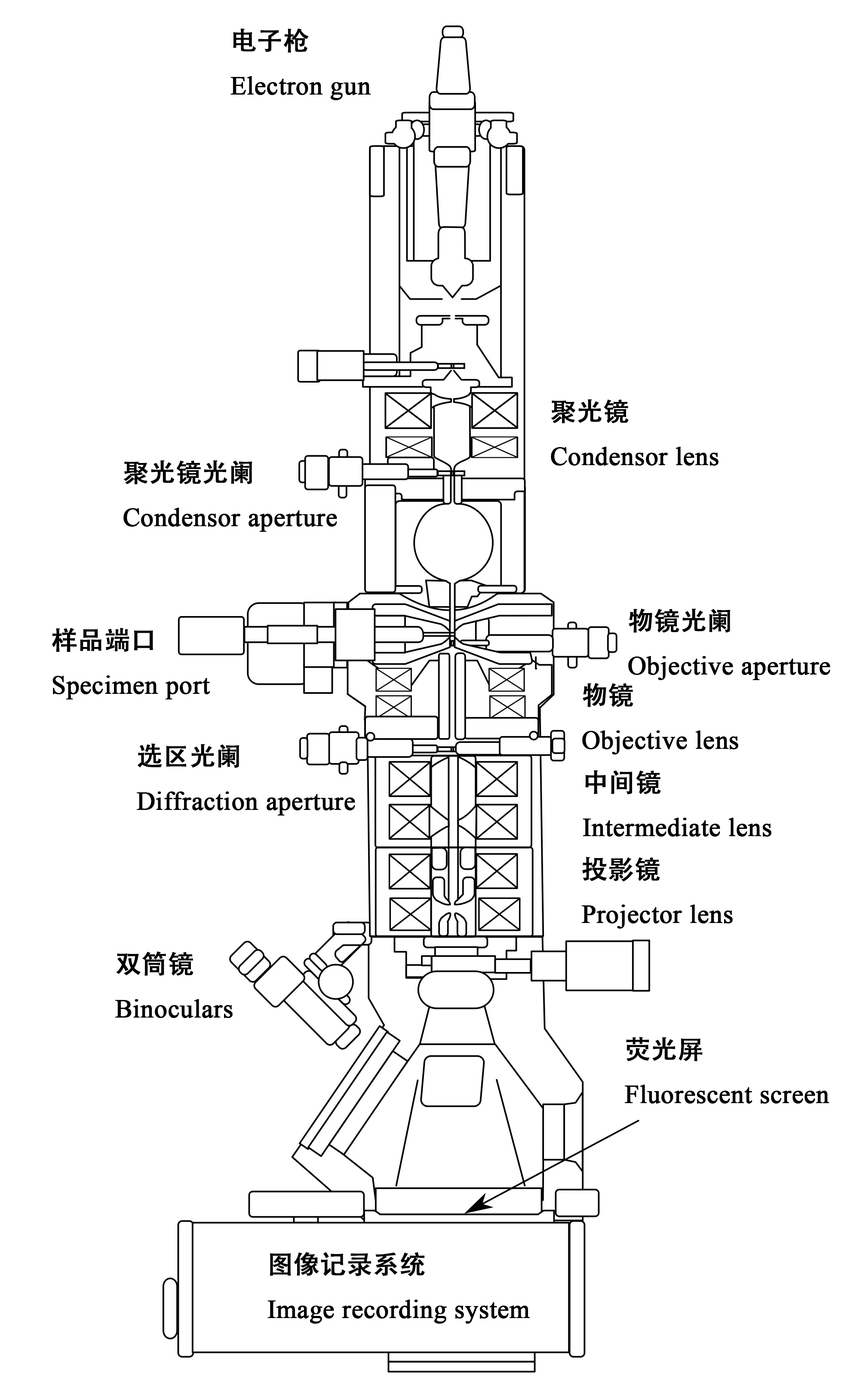
<style>
.page{position:relative;width:860px;height:1386px;background:#ffffff}
.page>*{position:absolute;margin:0}
.t1{font:25.8px "TimesNewRomanPSMT";color:#000000;font-weight:bold}
.t2{font:25.8px "AdobeHeitiStd-Regular";color:#000000;font-weight:bold}
</style>
<div class="page">
<p class="t1" style="left:230px;top:28px;width:141px;height:72px"><span class="t2">电子枪</span><br>Electron gun</p>
<p class="t1" style="left:551px;top:399px;width:168px;height:67px"><span class="t2">聚光镜<br></span>Condensor lens</p>
<p class="t1" style="left:123px;top:460px;width:214px;height:72px"><span class="t2">聚光镜光阑<br></span>Condensor aperture</p>
<p class="t1" style="left:628px;top:609px;width:202px;height:71px"><span class="t2">物镜光阑<br></span>Objective aperture</p>
<p class="t1" style="left:52px;top:628px;width:158px;height:72px"><span class="t2">样品端口<br></span>Specimen port</p>
<p class="t1" style="left:582px;top:683px;width:156px;height:72px"><span class="t2">物镜<br></span>Objective lens</p>
<p class="t1" style="left:137px;top:744px;width:218px;height:72px"><span class="t2">选区光阑<br></span>Diffraction aperture</p>
<p class="t1" style="left:583px;top:770px;width:188px;height:67px"><span class="t2">中间镜<br></span>Intermediate lens</p>
<p class="t1" style="left:582px;top:857px;width:151px;height:72px"><span class="t2">投影镜<br></span>Projector lens</p>
<p class="t1" style="left:115px;top:952px;width:118px;height:66px"><span class="t2">双筒镜<br></span>Binoculars</p>
<p class="t1" style="left:624px;top:1037px;width:206px;height:67px"><span class="t2">荧光屏<br></span>Fluorescent screen</p>
<p class="t1" style="left:267px;top:1252px;width:263px;height:72px"><span class="t2">图像记录系统<br></span>Image recording system</p>
</div>
